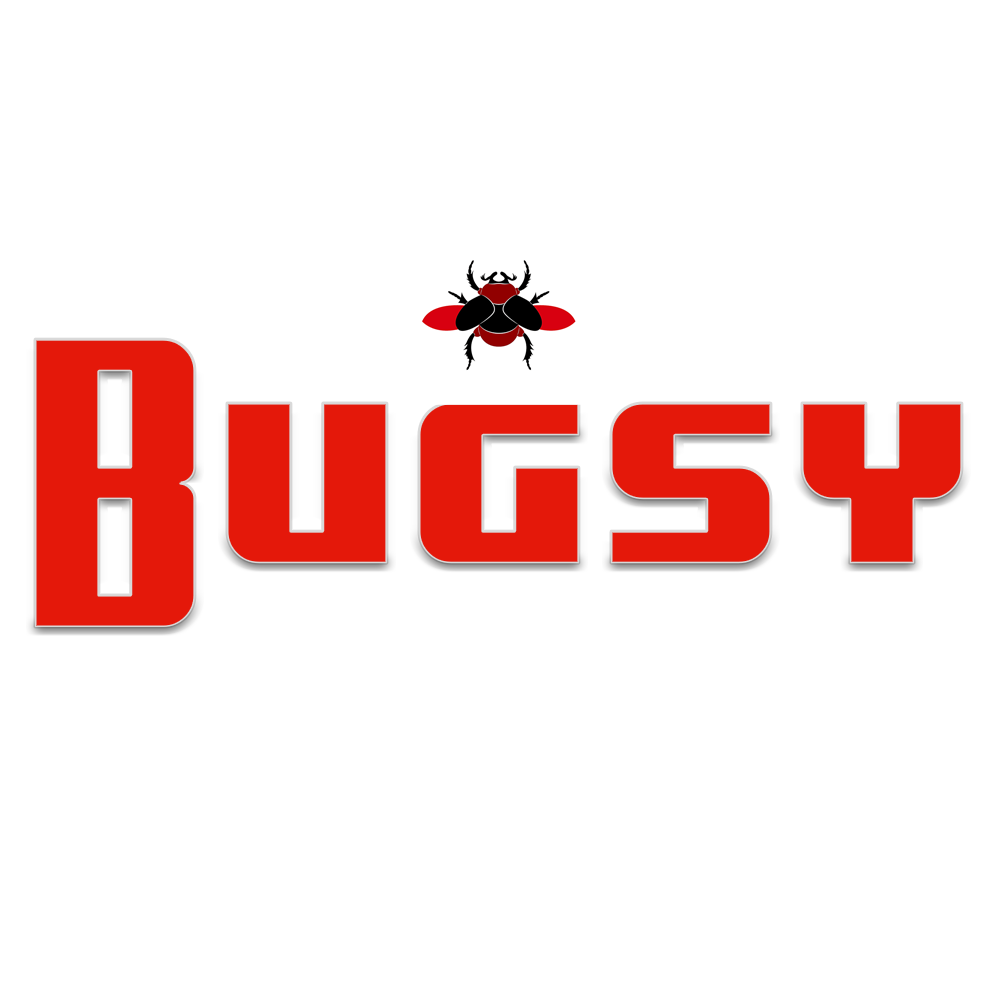
<style>
.page{position:relative;width:1000px;height:1000px;background:#ffffff}
.page>*{position:absolute;margin:0}
.t1{font:447.9px "PlusChannel-Regular";color:#d20015}
</style>
<div class="page">
<p class="t1" style="left:35px;top:339px;width:927px;height:288px">Bugsy</p>
</div>
